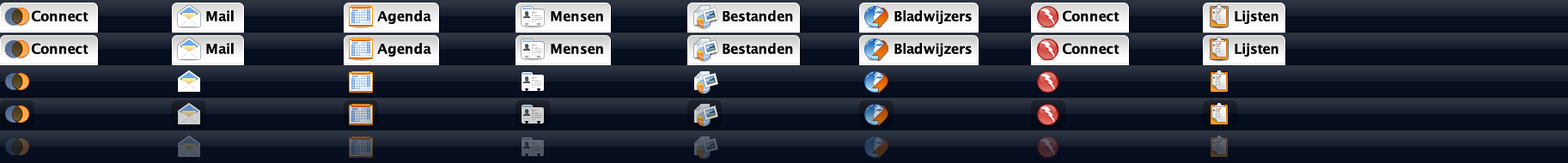
<style>
.page{position:relative;width:1568px;height:163px;background:#060e1f}
.page>*{position:absolute;margin:0}
.t1{font:13.7px "LucidaGrande-Bold";letter-spacing:-0.01em;color:#000000}
</style>
<div class="page">
<p class="t1" style="left:31px;top:10px;width:57px;height:11px">Connect</p>
<p class="t1" style="left:206px;top:10px;width:28px;height:11px">Mail</p>
<p class="t1" style="left:377px;top:10px;width:54px;height:14px">Agenda</p>
<p class="t1" style="left:551px;top:11px;width:52px;height:10px">Mensen</p>
<p class="t1" style="left:723px;top:10px;width:70px;height:11px">Bestanden</p>
<p class="t1" style="left:894px;top:10px;width:78px;height:14px">Bladwijzers</p>
<p class="t1" style="left:1062px;top:10px;width:58px;height:11px">Connect</p>
<p class="t1" style="left:1235px;top:10px;width:43px;height:14px">Lijsten</p>
<p class="t1" style="left:31px;top:43px;width:57px;height:11px">Connect</p>
<p class="t1" style="left:206px;top:43px;width:28px;height:11px">Mail</p>
<p class="t1" style="left:377px;top:43px;width:54px;height:14px">Agenda</p>
<p class="t1" style="left:551px;top:44px;width:52px;height:10px">Mensen</p>
<p class="t1" style="left:723px;top:43px;width:70px;height:11px">Bestanden</p>
<p class="t1" style="left:894px;top:43px;width:78px;height:14px">Bladwijzers</p>
<p class="t1" style="left:1062px;top:43px;width:58px;height:11px">Connect</p>
<p class="t1" style="left:1235px;top:43px;width:43px;height:14px">Lijsten</p>
</div>
